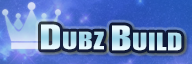
<style>
.page{position:relative;width:192px;height:64px}
.page>*{position:absolute;margin:0}
.t1{font:34.2px "Genuine";letter-spacing:0.04em;font-variant:small-caps;scale:1.26 1}
</style>
<div class="page">
<p class="t1" style="left:41px;top:24px;width:63px;height:26px">Dubz</p>
<p class="t1" style="left:112px;top:25px;width:70px;height:26px">Build</p>
</div>
